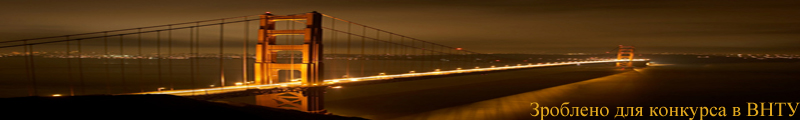
<style>
.page{position:relative;width:800px;height:120px}
.page>*{position:absolute;margin:0}
.t1{font:20px "TimesNewRomanPSMT";color:#e1a81e}
</style>
<div class="page">
<p class="t1" style="left:530px;top:102px;width:270px;height:19px">Зроблено для конкурса в ВНТУ</p>
</div>
